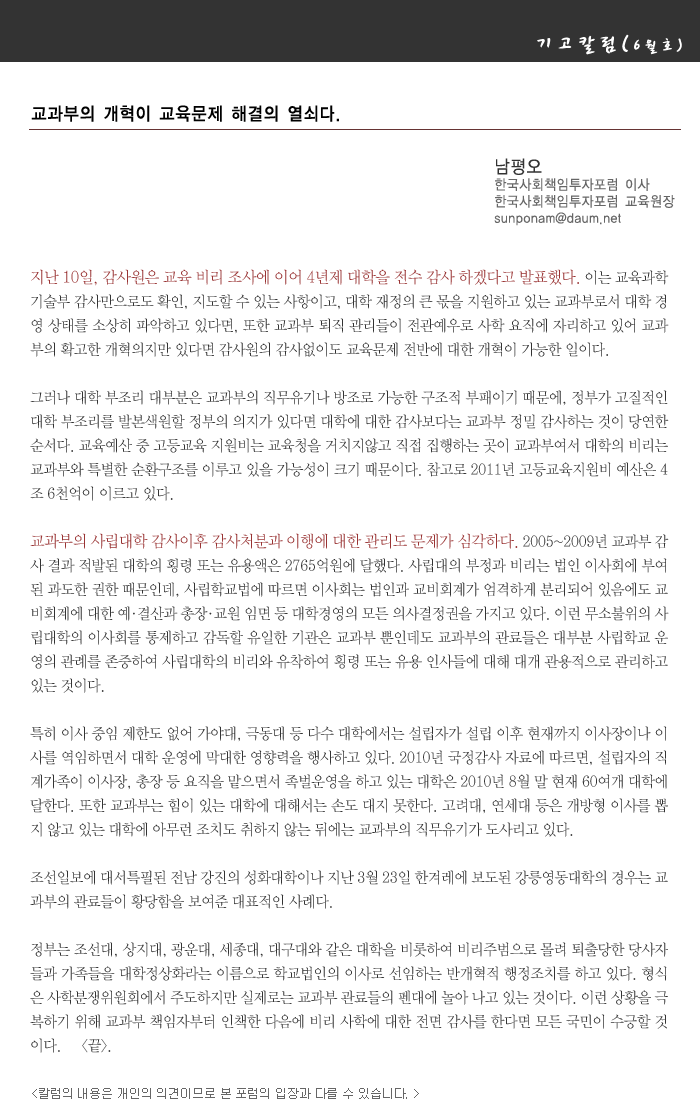
<style>
.page{position:relative;width:700px;height:1107px;background:#ffffff}
.page>*{position:absolute;margin:0}
.t1{font:24px "CwritB";letter-spacing:-0.01em;color:#ffffff;scale:0.9 1}
.t2{font:18px "CwritB";letter-spacing:-0.01em;color:#ffffff;scale:0.9 1}
.t3{font:18px "YDIYGO130-KSCpc-EUC-H";letter-spacing:-0.01em;color:#000000;scale:0.9 1}
.t4{font:14px "YDIYGO120-KSCpc-EUC-H";letter-spacing:-0.01em;color:#666666;scale:0.9 1}
.t5{font:18px "YDIYGO120-KSCpc-EUC-H";letter-spacing:-0.01em;color:#333333;scale:0.9 1}
.t6{font:15px/24px "YDIWebBatan";letter-spacing:-0.01em;color:#333333;scale:0.95 1}
.t7{font:16px/24px "YDIWebBatan";letter-spacing:-0.01em;color:#993333;scale:0.95 1}
.t8{font:12px "Gulim";letter-spacing:-0.01em;color:#666666}
</style>
<div class="page">
<p class="t1" style="left:537px;top:34px;width:145px;height:21px">기고칼럼(<span class="t2">6월호)</span></p>
<p class="t3" style="left:31px;top:105px;width:308px;height:17px">교과부의 개혁이 교육문제 해결의 열쇠다.</p>
<p class="t4" style="left:494px;top:158px;width:181px;height:68px"><span class="t5">남평오 <br></span>한국사회책임투자포럼 이사<br>한국사회책임투자포럼 교육원장<br>sunponam@daum.net</p>
<p class="t6" style="left:30px;top:269px;width:639px;height:784px;text-align:justify"><span class="t7">지난 10일, 감사원은 교육 비리 조사에 이어 4년제 대학을 전수 감사 하겠다고 발표했다. </span>이는 교육과학기술부 감사만으로도 확인, 지도할 수 있는 사항이고, 대학 재정의 큰 몫을 지원하고 있는 교과부로서 대학 경영 상태를 소상히 파악하고 있다면, 또한 교과부 퇴직 관리들이 전관예우로 사학 요직에 자리하고 있어 교과부의 확고한 개혁의지만 있다면 감사원의 감사없이도 교육문제 전반에 대한 개혁이 가능한 일이다.<br><br>그러나 대학 부조리 대부분은 교과부의 직무유기나 방조로 가능한 구조적 부패이기 때문에, 정부가 고질적인 대학 부조리를 발본색원할 정부의 의지가 있다면 대학에 대한 감사보다는 교과부 정밀 감사하는 것이 당연한 순서다. 교육예산 중 고등교육 지원비는 교육청을 거치지않고 직접 집행하는 곳이 교과부여서 대학의 비리는 교과부와 특별한 순환구조를 이루고 있을 가능성이 크기 때문이다. 참고로 2011년 고등교육지원비 예산은 4조 6천억이 이르고 있다.  <br><br><span class="t7">교과부의 사립대학 감사이후 감사처분과 이행에 대한 관리도 문제가 심각하다.</span> 2005~2009년 교과부 감사 결과 적발된 대학의 횡령 또는 유용액은 2765억원에 달했다. 사립대의 부정과 비리는 법인 이사회에 부여된 과도한 권한 때문인데, 사립학교법에 따르면 이사회는 법인과 교비회계가 엄격하게 분리되어 있음에도 교비회계에 대한 예·결산과 총장·교원 임면 등 대학경영의 모든 의사결정권을 가지고 있다. 이런 무소불위의 사립대학의 이사회를 통제하고 감독할 유일한 기관은 교과부 뿐인데도 교과부의 관료들은 대부분 사립학교 운영의 관례를 존중하여 사립대학의 비리와 유착하여 횡령 또는 유용 인사들에 대해 대개 관용적으로 관리하고 있는 것이다.<br><br>특히 이사 중임 제한도 없어 가야대, 극동대 등 다수 대학에서는 설립자가 설립 이후 현재까지 이사장이나 이사를 역임하면서 대학 운영에 막대한 영향력을 행사하고 있다. 2010년 국정감사 자료에 따르면, 설립자의 직계가족이 이사장, 총장 등 요직을 맡으면서 족벌운영을 하고 있는 대학은 2010년 8월 말 현재 60여개 대학에 달한다. 또한 교과부는 힘이 있는 대학에 대해서는 손도 대지 못한다. 고려대, 연세대 등은 개방형 이사를 뽑지 않고 있는 대학에 아무런 조치도 취하지 않는 뒤에는 교과부의 직무유기가 도사리고 있다.<br><br>조선일보에 대서특필된 전남 강진의 성화대학이나 지난 3월 23일 한겨레에 보도된 강릉영동대학의 경우는 교과부의 관료들이 황당함을 보여준 대표적인 사례다. <br><br>정부는 조선대, 상지대, 광운대, 세종대, 대구대와 같은 대학을 비롯하여 비리주범으로 몰려 퇴출당한 당사자들과 가족들을 대학정상화라는 이름으로 학교법인의 이사로 선임하는 반개혁적 행정조치를 하고 있다. 형식은 사학분쟁위원회에서 주도하지만 실제로는 교과부 관료들의 펜대에 놀아 나고 있는 것이다. 이런 상황을 극복하기 위해 교과부 책임자부터 인책한 다음에 비리 사학에 대한 전면 감사를 한다면 모든 국민이 수긍할 것이다.     &lt;끝&gt;.</p>
<p class="t8" style="left:32px;top:1088px;width:387px;height:11px">&lt;칼럼의 내용은 개인의 의견이므로 본 포럼의 입장과 다를 수 있습니다. &gt;</p>
</div>
